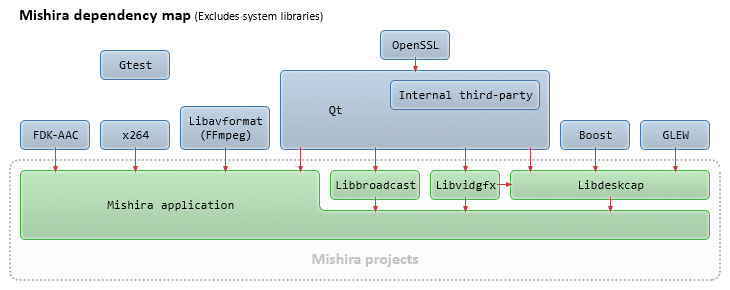
<style>
.page{position:relative;width:730px;height:290px;background:#ffffff}
.page>*{position:absolute;margin:0}
.t1{font:12px "Calibri";color:#000000}
.t2{font:16px "Calibri-Bold";color:#000000}
.t3{font:12px "Consolas";color:#000000}
.t4{font:16px "Calibri-Bold";color:#c3c3c3}
</style>
<div class="page">
<p class="t1" style="left:20px;top:9px;width:303px;height:14px"><span class="t2">Mishira dependency map </span>(Excludes system libraries)</p>
<p class="t3" style="left:392px;top:41px;width:47px;height:10px">OpenSSL</p>
<p class="t3" style="left:119px;top:61px;width:33px;height:8px">Gtest</p>
<p class="t3" style="left:399px;top:90px;width:134px;height:11px">Internal third-party</p>
<p class="t3" style="left:329px;top:106px;width:13px;height:10px">Qt</p>
<p class="t3" style="left:190px;top:116px;width:72px;height:25px;text-align:center">Libavformat<br>(FFmpeg)</p>
<p class="t3" style="left:34px;top:131px;width:44px;height:8px">FDK-AAC</p>
<p class="t3" style="left:123px;top:131px;width:26px;height:8px">x264</p>
<p class="t3" style="left:580px;top:131px;width:32px;height:8px">Boost</p>
<p class="t3" style="left:663px;top:131px;width:26px;height:8px">GLEW</p>
<p class="t3" style="left:336px;top:180px;width:80px;height:9px">Libbroadcast</p>
<p class="t3" style="left:437px;top:180px;width:59px;height:11px">Libvidgfx</p>
<p class="t3" style="left:579px;top:180px;width:65px;height:11px">Libdeskcap</p>
<p class="t3" style="left:107px;top:200px;width:127px;height:11px">Mishira application</p>
<p class="t4" style="left:312px;top:253px;width:107px;height:14px">Mishira projects</p>
</div>
